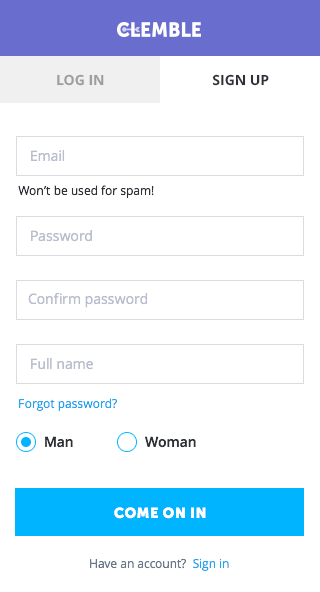
<style>
.page{position:relative;width:320px;height:592px;background:#ffffff}
.page>*{position:absolute;margin:0}
.t1{font:14px "OpenSans-Bold";color:#9e9ea0;text-transform:uppercase}
.t2{font:14px "OpenSans-Bold";color:#2f3139;text-transform:uppercase}
.t3{font:14px "OpenSans";color:#b9bdcd}
.t4{font:12px "OpenSans";color:#2f3139}
.t5{font:12px "OpenSans";color:#24a6ef}
.t6{font:14px "OpenSans-Semibold";color:#2f3139}
.t7{font:14px "MuseoSans-900";letter-spacing:0.05em;color:#ffffff;text-transform:uppercase}
.t8{font:12px "OpenSans";color:#697889}
</style>
<div class="page">
<p class="t1" style="left:57px;top:74px;width:47px;height:12px">Log in</p>
<p class="t2" style="left:212px;top:74px;width:57px;height:12px">Sign up</p>
<p class="t3" style="left:31px;top:150px;width:34px;height:12px">Email</p>
<p class="t4" style="left:18px;top:185px;width:136px;height:13px">Won’t be used for spam!</p>
<p class="t3" style="left:31px;top:230px;width:61px;height:12px">Password</p>
<p class="t3" style="left:28px;top:292px;width:120px;height:16px">Confirm password</p>
<p class="t3" style="left:31px;top:358px;width:62px;height:12px">Full name</p>
<p class="t5" style="left:19px;top:398px;width:98px;height:13px">Forgot password?</p>
<p class="t6" style="left:45px;top:436px;width:28px;height:12px">Man</p>
<p class="t6" style="left:145px;top:436px;width:51px;height:12px">Woman</p>
<p class="t7" style="left:114px;top:507px;width:92px;height:12px">Come on in</p>
<p class="t8" style="left:90px;top:558px;width:139px;height:13px">Have an account?  <span class="t5">Sign in</span></p>
</div>
